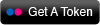
<style>
.page{position:relative;width:100px;height:25px;background:#000000}
.page>*{position:absolute;margin:0}
.t1{font:12px "Helvetica";color:#ffffff}
</style>
<div class="page">
<p class="t1" style="left:28px;top:7px;width:65px;height:9px">Get A Token</p>
</div>
